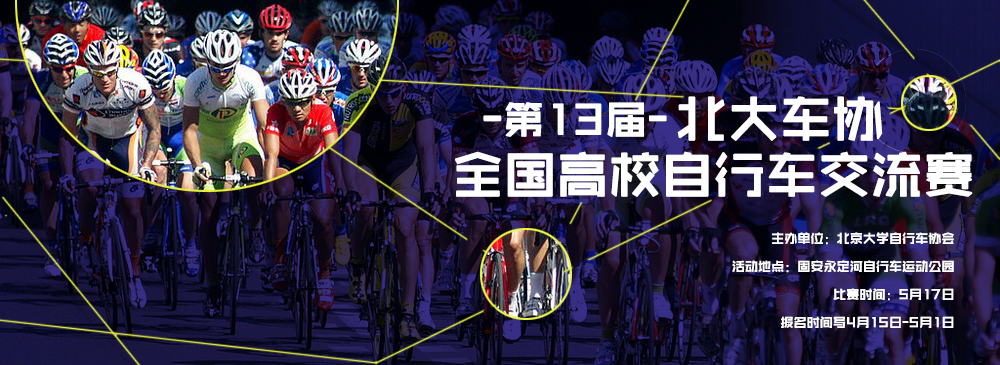
<style>
.page{position:relative;width:1000px;height:365px}
.page>*{position:absolute;margin:0}
.t1{font:52.5px/56px "ZHSRXT--GBK1-0";letter-spacing:-0.02em;color:#ffffff;font-weight:bold}
.t2{font:41.4px "ZHSRXT--GBK1-0";letter-spacing:-0.02em;color:#ffffff;font-weight:bold}
.t3{font:13.1px/28px "ZHSRXT--GBK1-0";letter-spacing:-0.02em;color:#ffffff;font-weight:bold}
</style>
<div class="page">
<p class="t1" style="left:455px;top:96px;width:518px;height:101px;text-align:center">北大车协<br>全国高校自行车交流赛</p>
<p class="t2" style="left:483px;top:102px;width:184px;height:35px">-第13届-</p>
<p class="t3" style="left:732px;top:232px;width:222px;height:96px;text-align:right">主办单位：北京大学自行车协会<br>活动地点：固安永定河自行车运动公园<br>比赛时间：5月17日<br>报名时间写4月15日-5月1日</p>
</div>
